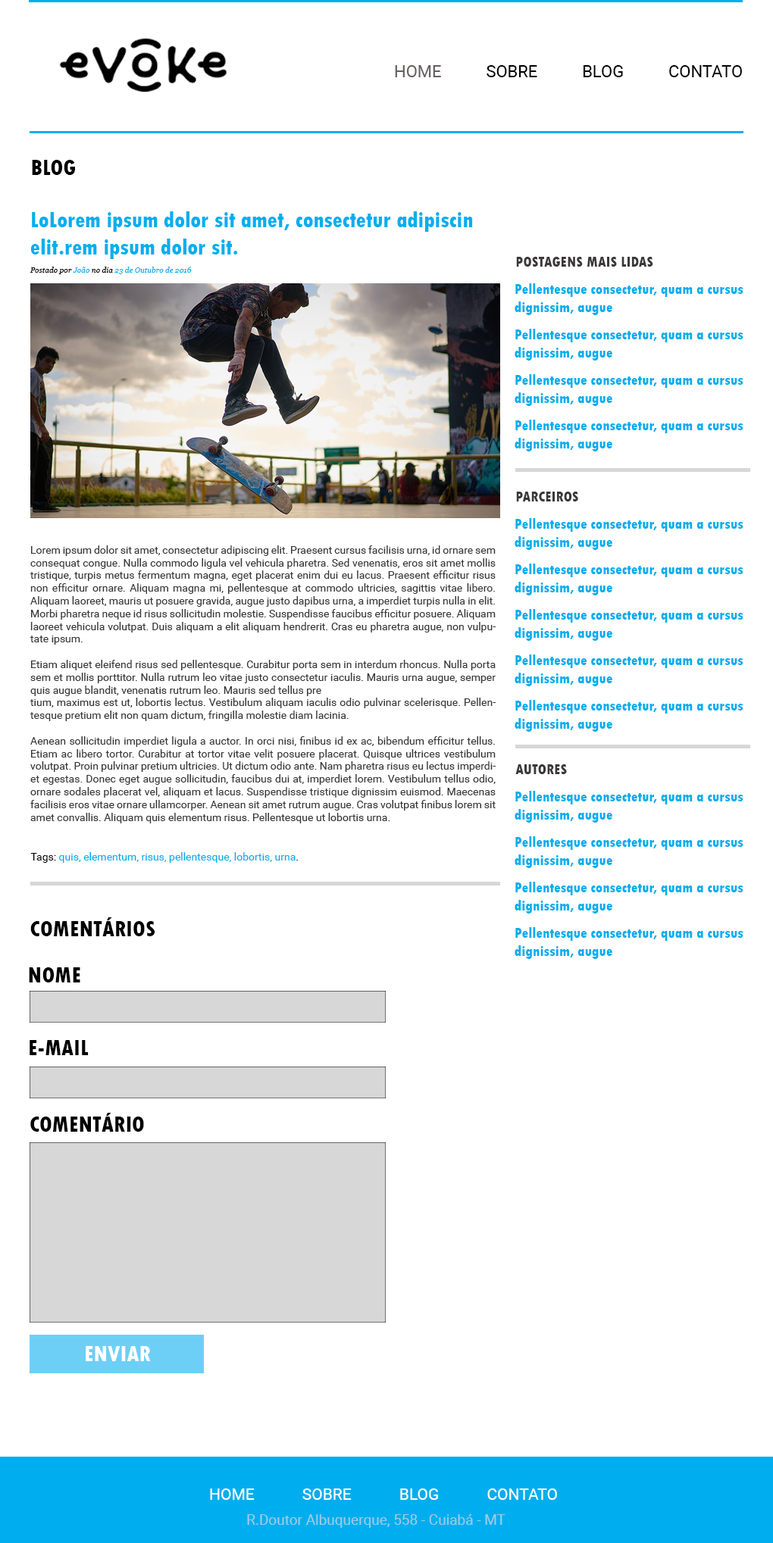
<style>
.page{position:relative;width:773px;height:1543px;background:#ffffff}
.page>*{position:absolute;margin:0}
.t1{font:16.7px "Roboto-Regular";color:#000000}
.t2{font:16.7px "Roboto-Regular";color:#665f5f}
.t3{font:22.7px "TwCenMT-CondensedExtraBold";color:#000000}
.t4{font:22.7px "TwCenMT-CondensedExtraBold";color:#00aeef}
.t5{font:15.2px "TwCenMT-CondensedExtraBold";color:#3b3838}
.t6{font:7.6px "Georgia-Italic";color:#00aeef}
.t7{font:7.6px "Georgia-Italic";color:#000000}
.t8{font:15.2px "TwCenMT-CondensedExtraBold";color:#00aeef}
.t9{font:10.6px "Roboto-Regular";color:#383535}
.t10{font:10.6px "Roboto-Regular";color:#00aeef}
.t11{font:10.6px "Roboto-Regular";color:#000000}
.t12{font:22.7px "TwCenMT-CondensedExtraBold";color:#ffffff}
.t13{font:15.9px "Roboto-Regular";color:#ffffff}
.t14{font:14.4px "Roboto-Regular";color:#9bcbe6}
</style>
<div class="page">
<p class="t1" style="left:395px;top:65px;width:347px;height:12px"><span class="t2">HOME</span> SOBRE BLOG CONTATO</p>
<p class="t3" style="left:32px;top:160px;width:43px;height:15px">BLOG</p>
<p class="t4" style="left:30px;top:211px;width:443px;height:48px"><span class="t3"><br></span>LoLorem ipsum dolor sit amet, consectetur adipiscin elit.rem ipsum dolor sit.</p>
<p class="t5" style="left:516px;top:257px;width:137px;height:10px">POSTAGENS MAIS LIDAS</p>
<p class="t6" style="left:30px;top:267px;width:162px;height:7px"><span class="t7">Postado por </span>João <span class="t7">no dia</span> 23 de Outubro de 2016</p>
<p class="t8" style="left:514px;top:283px;width:229px;height:32px">Pellentesque consectetur, quam a cursus<br>dignissim, augue</p>
<p class="t8" style="left:514px;top:329px;width:229px;height:32px">Pellentesque consectetur, quam a cursus<br>dignissim, augue</p>
<p class="t8" style="left:514px;top:374px;width:229px;height:32px">Pellentesque consectetur, quam a cursus<br>dignissim, augue</p>
<p class="t8" style="left:514px;top:420px;width:229px;height:32px">Pellentesque consectetur, quam a cursus<br>dignissim, augue</p>
<p class="t5" style="left:516px;top:492px;width:62px;height:10px">PARCEIROS</p>
<p class="t8" style="left:514px;top:518px;width:229px;height:32px">Pellentesque consectetur, quam a cursus<br>dignissim, augue</p>
<p class="t9" style="left:30px;top:545px;width:465px;height:278px;text-align:justify">Lorem ipsum dolor sit amet, consectetur adipiscing elit. Praesent cursus facilisis urna, id ornare sem consequat congue. Nulla commodo ligula vel vehicula pharetra. Sed venenatis, eros sit amet mollis tristique, turpis metus fermentum magna, eget placerat enim dui eu lacus. Praesent efficitur risus non efficitur ornare. Aliquam magna mi, pellentesque at commodo ultricies, sagittis vitae libero. Aliquam laoreet, mauris ut posuere gravida, augue justo dapibus urna, a imperdiet turpis nulla in elit. Morbi pharetra neque id risus sollicitudin molestie. Suspendisse faucibus efficitur posuere. Aliquam laoreet vehicula volutpat. Duis aliquam a elit aliquam hendrerit. Cras eu pharetra augue, non vulputate ipsum.<br><br>Etiam aliquet eleifend risus sed pellentesque. Curabitur porta sem in interdum rhoncus. Nulla porta sem et mollis porttitor. Nulla rutrum leo vitae justo consectetur iaculis. Mauris urna augue, semper quis augue blandit, venenatis rutrum leo. Mauris sed tellus pre<br>tium, maximus est ut, lobortis lectus. Vestibulum aliquam iaculis odio pulvinar scelerisque. Pellentesque pretium elit non quam dictum, fringilla molestie diam lacinia.<br><br>Aenean sollicitudin imperdiet ligula a auctor. In orci nisi, finibus id ex ac, bibendum efficitur tellus. Etiam ac libero tortor. Curabitur at tortor vitae velit posuere placerat. Quisque ultrices vestibulum volutpat. Proin pulvinar pretium ultricies. Ut dictum odio ante. Nam pharetra risus eu lectus imperdiet egestas. Donec eget augue sollicitudin, faucibus dui at, imperdiet lorem. Vestibulum tellus odio, ornare sodales placerat vel, aliquam et lacus. Suspendisse tristique dignissim euismod. Maecenas facilisis eros vitae ornare ullamcorper. Aenean sit amet rutrum augue. Cras volutpat finibus lorem sit amet convallis. Aliquam quis elementum risus. Pellentesque ut lobortis urna.</p>
<p class="t8" style="left:514px;top:564px;width:229px;height:31px">Pellentesque consectetur, quam a cursus<br>dignissim, augue</p>
<p class="t8" style="left:514px;top:609px;width:229px;height:32px">Pellentesque consectetur, quam a cursus<br>dignissim, augue</p>
<p class="t8" style="left:514px;top:655px;width:229px;height:31px">Pellentesque consectetur, quam a cursus<br>dignissim, augue</p>
<p class="t8" style="left:514px;top:700px;width:229px;height:32px">Pellentesque consectetur, quam a cursus<br>dignissim, augue</p>
<p class="t5" style="left:515px;top:764px;width:52px;height:10px">AUTORES</p>
<p class="t8" style="left:514px;top:791px;width:229px;height:32px">Pellentesque consectetur, quam a cursus<br>dignissim, augue</p>
<p class="t8" style="left:514px;top:836px;width:229px;height:32px">Pellentesque consectetur, quam a cursus<br>dignissim, augue</p>
<p class="t10" style="left:30px;top:852px;width:268px;height:11px"><span class="t11">Tags: </span>quis, elementum, risus, pellentesque, lobortis, urna<span class="t11">.</span></p>
<p class="t8" style="left:514px;top:882px;width:229px;height:32px">Pellentesque consectetur, quam a cursus<br>dignissim, augue</p>
<p class="t3" style="left:30px;top:917px;width:125px;height:19px">COMENTÁRIOS</p>
<p class="t8" style="left:514px;top:927px;width:229px;height:32px">Pellentesque consectetur, quam a cursus<br>dignissim, augue</p>
<p class="t3" style="left:29px;top:967px;width:51px;height:16px">NOME</p>
<p class="t3" style="left:30px;top:1040px;width:59px;height:15px">E-MAIL</p>
<p class="t3" style="left:30px;top:1113px;width:114px;height:19px">COMENTÁRIO</p>
<p class="t12" style="left:86px;top:1346px;width:65px;height:15px">ENVIAR</p>
<p class="t13" style="left:210px;top:1489px;width:347px;height:11px">HOME SOBRE BLOG CONTATO</p>
<p class="t14" style="left:247px;top:1514px;width:258px;height:14px">R.Doutor Albuquerque, 558 - Cuiabá - MT</p>
</div>
